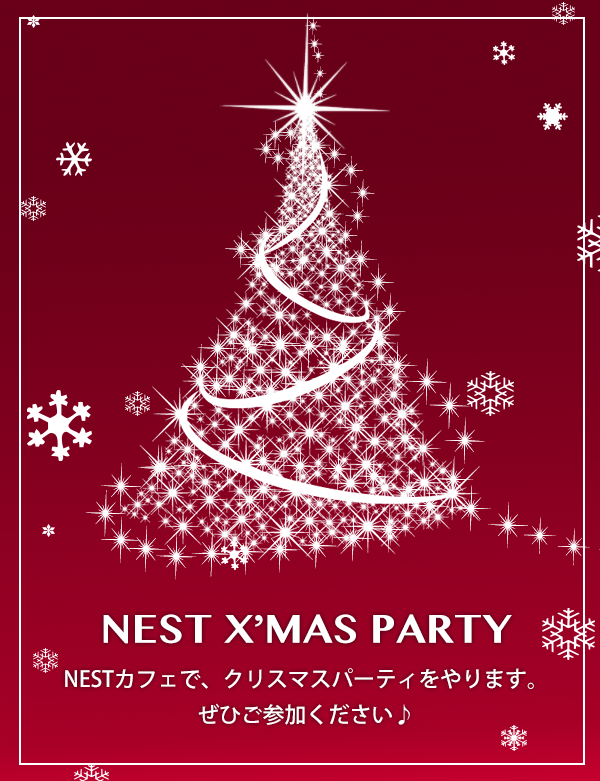
<style>
.page{position:relative;width:600px;height:781px}
.page>*{position:absolute;margin:0}
.t1{font:21.7px/44px "KozGoPr6N-Medium";color:#ffffff;text-transform:uppercase}
.t2{font:57.1px/40.8px "SinhalaMN-Bold";color:#ffffff;text-transform:uppercase}
.t3{font:21.7px/35.8px "KozGoPr6N-Medium";color:#ffffff;text-transform:uppercase}
</style>
<div class="page">
<p class="t1" style="left:65px;top:614px;width:469px;height:111px;text-align:center"><span class="t2">nest x’mas party<br></span>NESTカフェで、クリスマスパーティをやります。<br><span class="t3">ぜひご参加ください♪</span></p>
</div>
